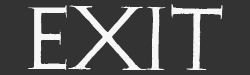
<style>
.page{position:relative;width:250px;height:75px;background:#333333}
.page>*{position:absolute;margin:0}
.t1{font:66.7px "Archeologicaps";color:#f7f7f7;text-transform:uppercase}
</style>
<div class="page">
<p class="t1" style="left:27px;top:4px;width:196px;height:66px">Exit</p>
</div>
